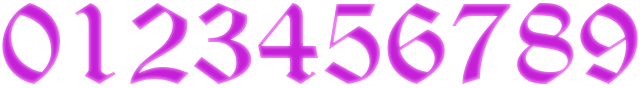
<style>
.page{position:relative;width:640px;height:88px;background:#ffffff}
.page>*{position:absolute;margin:0}
.t1{font:120px "OldEnglishTextMT";scale:1.05 1}
</style>
<div class="page">
<p class="t1" style="left:2px;top:3px;width:636px;height:81px">0123456789</p>
</div>
